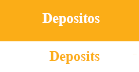
<style>
.page{position:relative;width:139px;height:72px;background:#fbad17}
.page>*{position:absolute;margin:0}
.t1{font:14px "TimesNewRomanPS-BoldMT";color:#ffffff}
.t2{font:14px "TimesNewRomanPS-BoldMT";color:#fbad18}
</style>
<div class="page">
<p class="t1" style="left:42px;top:13px;width:58px;height:13px">Depositos</p>
<p class="t2" style="left:49px;top:51px;width:51px;height:13px">Deposits</p>
</div>
